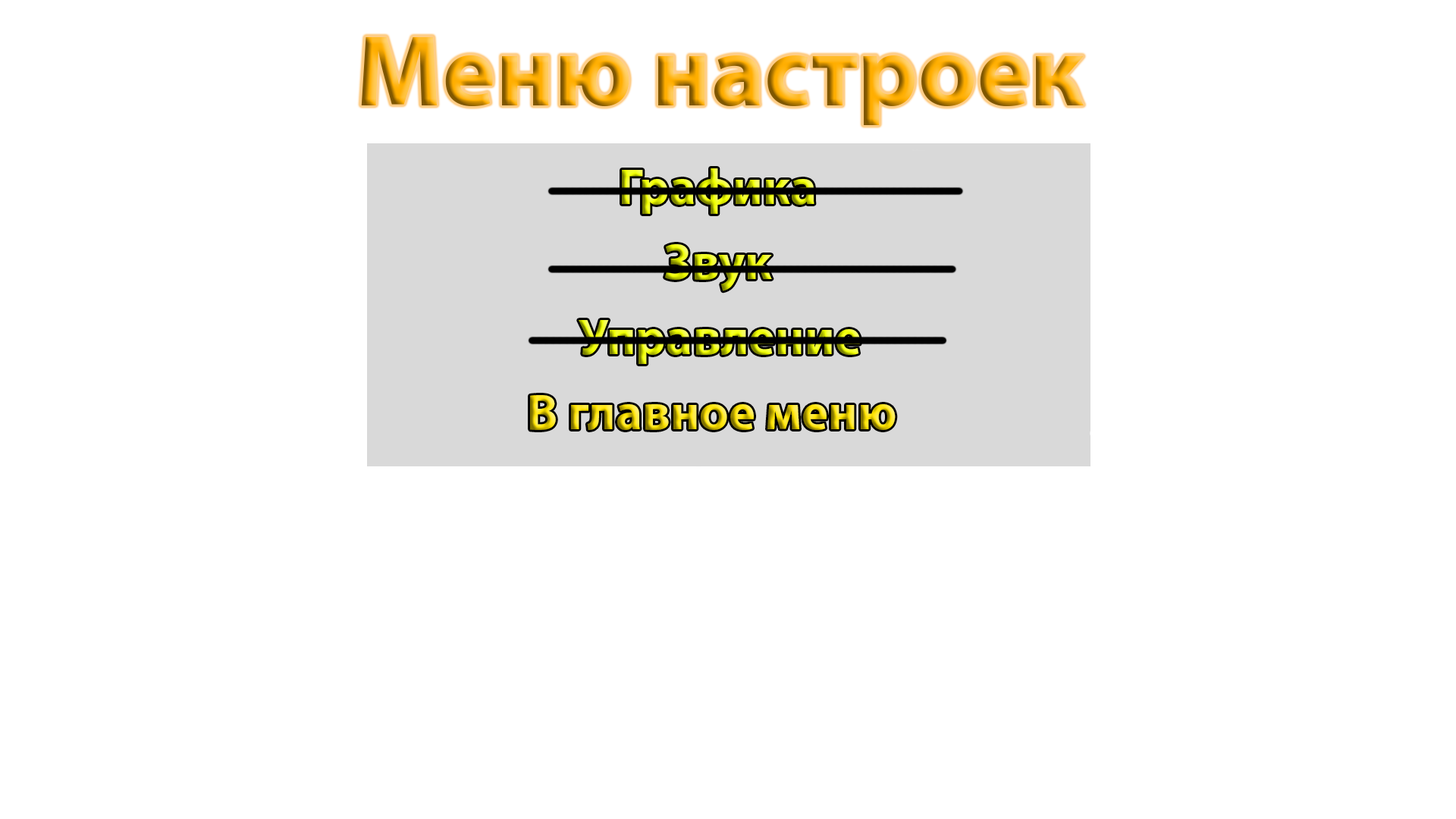
<style>
.page{position:relative;width:1456px;height:819px;background:#ffffff}
.page>*{position:absolute;margin:0}
.t1{font:101.1px "MyriadPro-Bold"}
.t2{font:50.6px "MyriadPro-Bold"}
</style>
<div class="page">
<p class="t1" style="left:361px;top:37px;width:723px;height:88px">Меню настроек</p>
<p class="t2" style="left:622px;top:168px;width:192px;height:46px">Графика</p>
<p class="t2" style="left:665px;top:244px;width:107px;height:47px">Звук</p>
<p class="t2" style="left:579px;top:320px;width:281px;height:44px">Управление</p>
<p class="t2" style="left:530px;top:395px;width:366px;height:35px">В главное меню</p>
</div>
